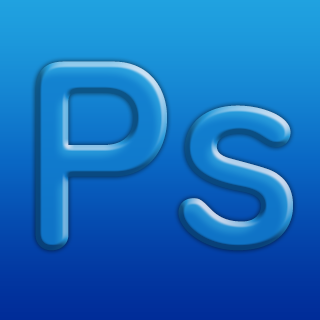
<style>
.page{position:relative;width:320px;height:320px}
.page>*{position:absolute;margin:0}
.t1{font:234px "Jun501Pro-Bold";color:#1280cf}
</style>
<div class="page">
<p class="t1" style="left:35px;top:61px;width:258px;height:190px;opacity:0.75">Ps</p>
</div>
